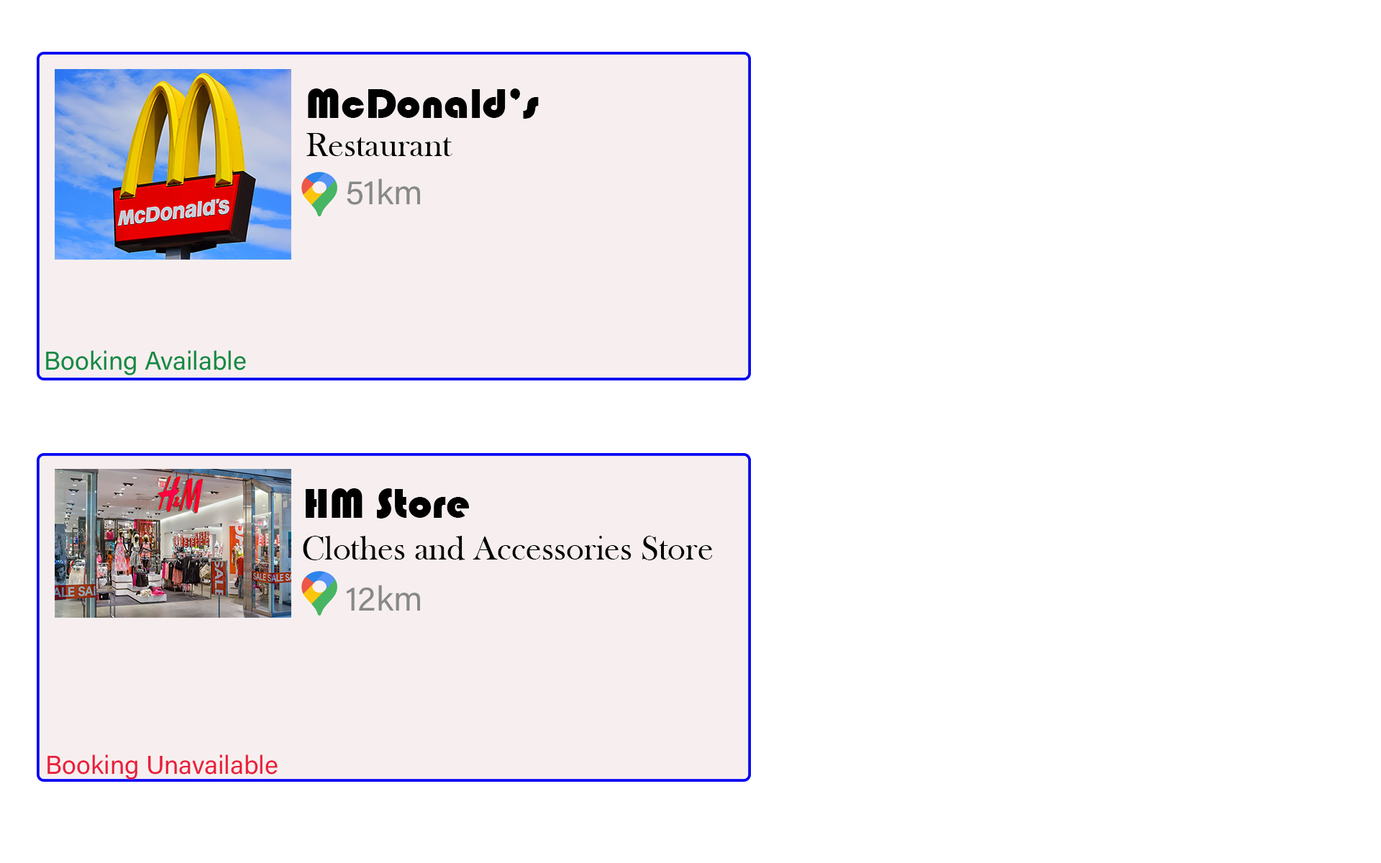
<style>
.page{position:relative;width:1381px;height:863px;background:#ffffff}
.page>*{position:absolute;margin:0}
.t1{font:43.2px "Bauhaus93";color:#000000}
.t2{font:34.5px "BaskOldFace";color:#000000}
.t3{font:34.5px "AcuminConcept-Regular";color:#878988}
.t4{font:25.9px "AcuminConcept-Regular";color:#0e8b43}
.t5{font:25.9px "AcuminConcept-Regular";color:#e91f3c}
</style>
<div class="page">
<p class="t1" style="left:308px;top:88px;width:231px;height:31px">McDonald’s</p>
<p class="t2" style="left:306px;top:133px;width:147px;height:23px">Restaurant</p>
<p class="t3" style="left:347px;top:178px;width:73px;height:27px">51km</p>
<p class="t4" style="left:46px;top:350px;width:200px;height:26px">Booking Available</p>
<p class="t1" style="left:306px;top:488px;width:163px;height:31px">HM Store</p>
<p class="t2" style="left:303px;top:536px;width:410px;height:24px">Clothes and Accessories Store</p>
<p class="t3" style="left:347px;top:585px;width:73px;height:26px">12km</p>
<p class="t5" style="left:47px;top:755px;width:231px;height:25px">Booking Unavailable</p>
</div>
